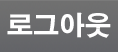
<style>
.page{position:relative;width:118px;height:52px}
.page>*{position:absolute;margin:0}
.t1{font:26px "AdobeGothicStd-Bold";color:#ffffff}
</style>
<div class="page">
<p class="t1" style="left:7px;top:12px;width:104px;height:26px">로그아웃</p>
</div>
